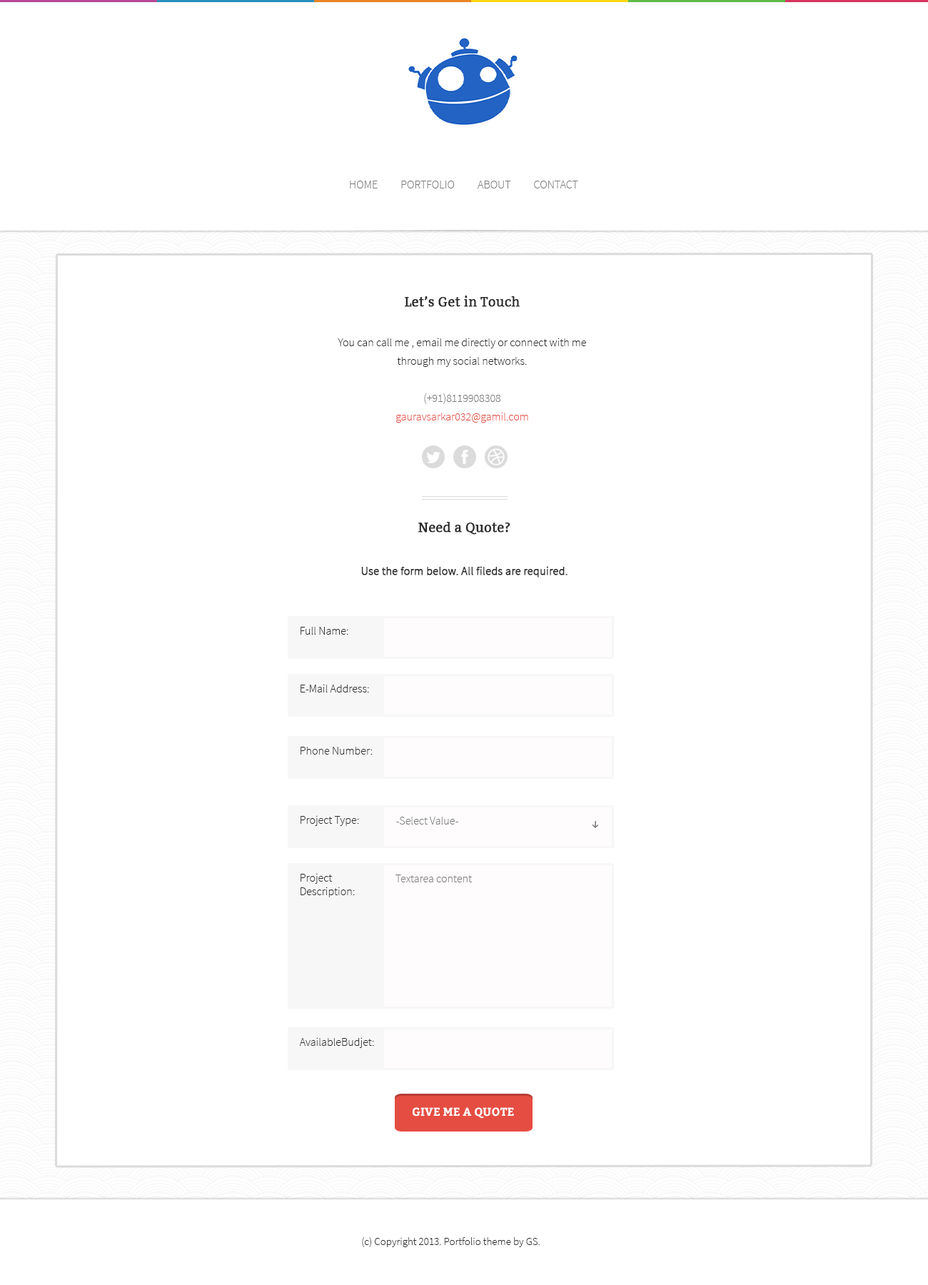
<style>
.page{position:relative;width:928px;height:1285px;background:#ffffff}
.page>*{position:absolute;margin:0}
.t1{font:11.4px "SourceSansPro-Light";color:#7a7a7a;text-transform:uppercase}
.t2{font:11.4px/18.6px "SourceSansPro-Light";color:#2b2b2b}
.t3{font:12.8px/21.4px "Bitter-Regular";color:#2b2b2b;font-weight:bold}
.t4{font:11.4px/18.6px "SourceSansPro-Light";color:#2b2b2b;text-transform:uppercase}
.t5{font:11.4px/18.6px "SourceSansPro-Light";color:#7a7a7a}
.t6{font:11.4px/18.6px "SourceSansPro-Light";color:#e54d42}
.t7{font:11.4px/21.4px "SourceSansPro-Light";color:#2b2b2b;font-weight:bold}
.t8{font:11.4px "SourceSansPro-Light";color:#2b2b2b}
.t9{font:11.4px "SourceSansPro-Light";color:#7a7a7a}
.t10{font:11.4px "Bitter-Bold";color:#fefefe;text-transform:uppercase}
.t11{font:10.7px "SourceSansPro-Light";color:#2b2b2b}
</style>
<div class="page">
<p class="t1" style="left:350px;top:181px;width:228px;height:7px">HOME          PORTFOLIO          ABOUT          CONTACT</p>
<p class="t2" style="left:338px;top:296px;width:248px;height:127px;text-align:center"><span class="t3">Let’s Get in Touch<br><br></span><span class="t4">Y</span>ou can call me , email me directly or connect with me through my social networks.<br><br><span class="t5">(+91)8119908308<br></span><span class="t6">gauravsarkar032@gamil.com</span></p>
<p class="t7" style="left:361px;top:522px;width:207px;height:56px;text-align:center"><span class="t3">Need a Quote?<br><br></span>Use the form below. All fileds are required.</p>
<p class="t8" style="left:301px;top:627px;width:47px;height:8px">Full Name:</p>
<p class="t8" style="left:301px;top:684px;width:68px;height:8px">E-Mail Address:</p>
<p class="t8" style="left:301px;top:747px;width:72px;height:8px">Phone Number:</p>
<p class="t8" style="left:301px;top:815px;width:58px;height:11px">Project Type:</p>
<p class="t9" style="left:396px;top:817px;width:62px;height:8px">-Select Value-</p>
<p class="t8" style="left:301px;top:873px;width:54px;height:24px">Project <br>Description:</p>
<p class="t9" style="left:395px;top:874px;width:77px;height:8px">Textarea content</p>
<p class="t8" style="left:299px;top:1037px;width:75px;height:11px">AvailableBudjet:</p>
<p class="t10" style="left:413px;top:1107px;width:101px;height:12px">Give me a quote</p>
<p class="t11" style="left:362px;top:1237px;width:178px;height:10px">(c) Copyright 2013. Portfolio theme by GS.</p>
</div>
